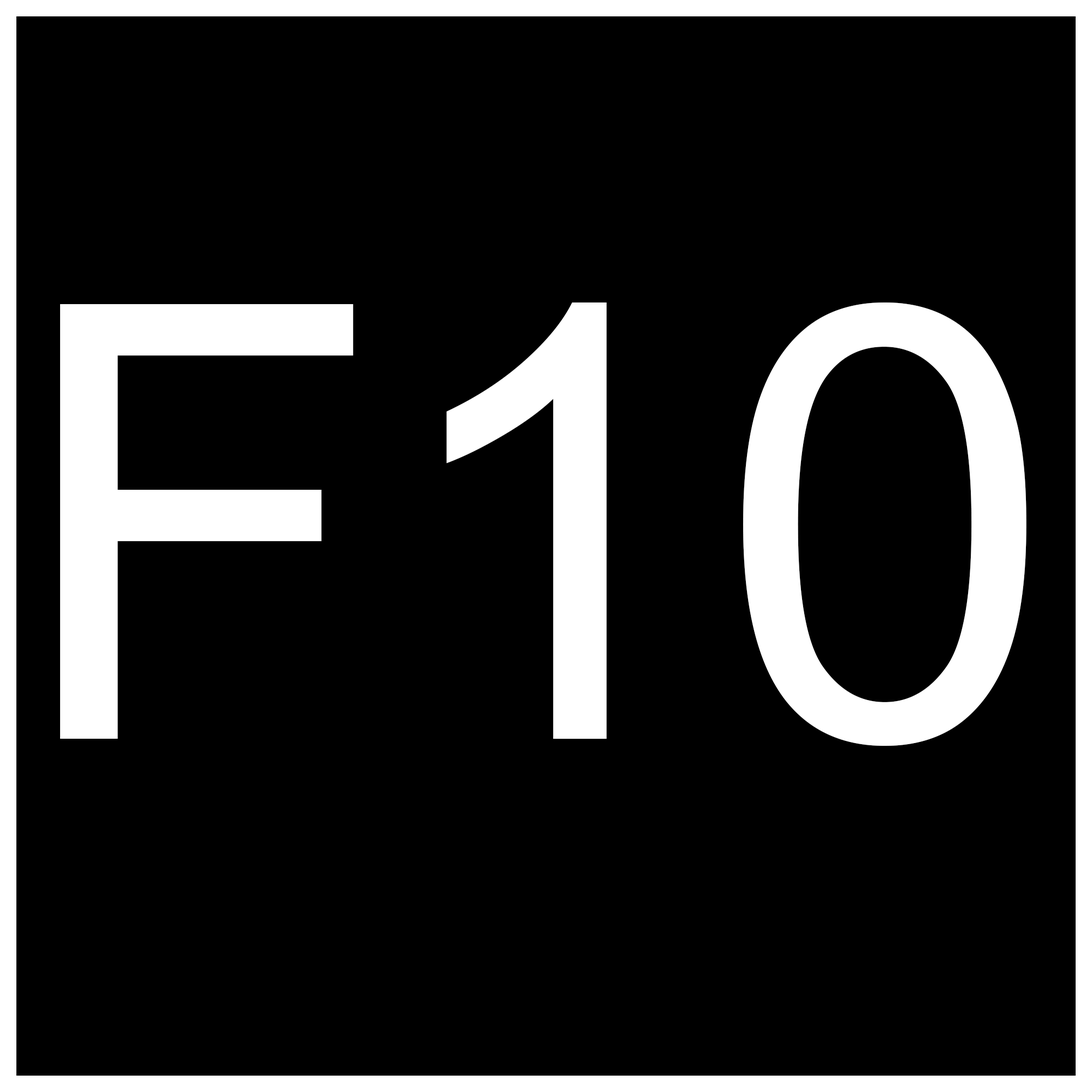
<style>
.page{position:relative;width:1092px;height:1092px;background:#000000}
.page>*{position:absolute;margin:0}
.t1{font:606.7px "ArialMT";color:#ffffff}
</style>
<div class="page">
<p class="t1" style="left:60px;top:302px;width:966px;height:444px">F10</p>
</div>
